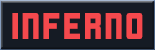
<style>
.page{position:relative;width:155px;height:50px;background:#151b24}
.page>*{position:absolute;margin:0}
.t1{font:36px "Cornerstone";color:#f5494d}
</style>
<div class="page">
<p class="t1" style="left:12px;top:13px;width:131px;height:26px">inferno</p>
</div>
